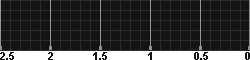
<style>
.page{position:relative;width:250px;height:60px;background:#141414}
.page>*{position:absolute;margin:0}
.t1{font:11px "Arial-BoldMT";color:#141414}
</style>
<div class="page">
<p class="t1" style="left:0px;top:52px;width:14px;height:8px">2.5</p>
<p class="t1" style="left:48px;top:52px;width:5px;height:8px">2</p>
<p class="t1" style="left:93px;top:52px;width:14px;height:8px">1.5</p>
<p class="t1" style="left:148px;top:52px;width:4px;height:8px">1</p>
<p class="t1" style="left:194px;top:52px;width:14px;height:8px">0.5</p>
<p class="t1" style="left:245px;top:52px;width:5px;height:8px">0</p>
</div>
